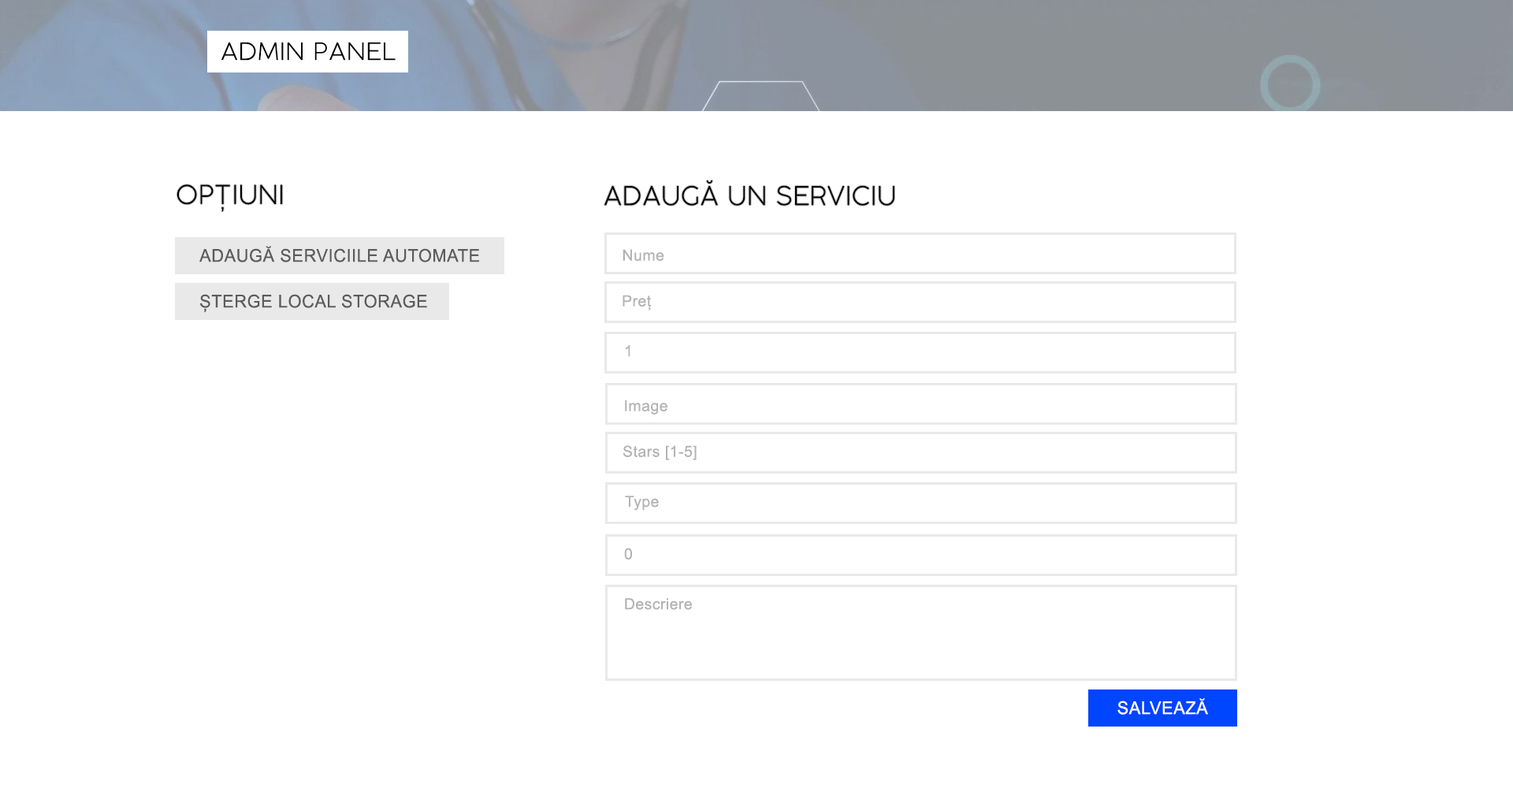
<style>
.page{position:relative;width:1513px;height:788px;background:#ffffff}
.page>*{position:absolute;margin:0}
.t1{font:23.7px "COCOGOOSE-UltraLight";letter-spacing:0.025em;color:#000000}
.t2{font:25.7px "COCOGOOSE-UltraLight";letter-spacing:0.025em;color:#000000}
.t3{font:17.7px "ArialMT";letter-spacing:0.025em;color:#5c5c5c}
.t4{font:15.3px "ArialMT";letter-spacing:0.025em;color:#b4b2b2}
.t5{font:17.7px "ArialMT";letter-spacing:0.025em;color:#ffffff}
</style>
<div class="page">
<p class="t1" style="left:221px;top:42px;width:175px;height:19px">ADMIN PANEL</p>
<p class="t2" style="left:177px;top:184px;width:106px;height:28px">OPȚIUNI</p>
<p class="t2" style="left:604px;top:180px;width:290px;height:26px">ADAUGĂ UN SERVICIU</p>
<p class="t3" style="left:199px;top:246px;width:280px;height:16px">ADAUGĂ SERVICIILE AUTOMATE</p>
<p class="t4" style="left:623px;top:249px;width:41px;height:12px">Nume</p>
<p class="t3" style="left:200px;top:294px;width:227px;height:19px">ȘTERGE LOCAL STORAGE</p>
<p class="t4" style="left:623px;top:295px;width:29px;height:16px">Preț</p>
<p class="t4" style="left:626px;top:345px;width:4px;height:12px">1</p>
<p class="t4" style="left:625px;top:400px;width:42px;height:15px">Image</p>
<p class="t4" style="left:623px;top:445px;width:74px;height:15px">Stars [1-5]</p>
<p class="t4" style="left:625px;top:496px;width:34px;height:15px">Type</p>
<p class="t4" style="left:624px;top:548px;width:8px;height:12px">0</p>
<p class="t4" style="left:625px;top:598px;width:67px;height:12px">Descriere</p>
<p class="t5" style="left:1117px;top:698px;width:91px;height:17px">SALVEAZĂ</p>
</div>
